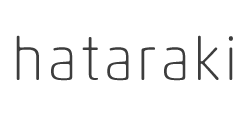
<style>
.page{position:relative;width:250px;height:117px;background:#ffffff}
.page>*{position:absolute;margin:0}
.t1{font:60px "AkkoRoundedPro-Thin";letter-spacing:0.1em;color:#3d3d3d}
</style>
<div class="page">
<p class="t1" style="left:16px;top:35px;width:217px;height:46px">hataraki</p>
</div>
